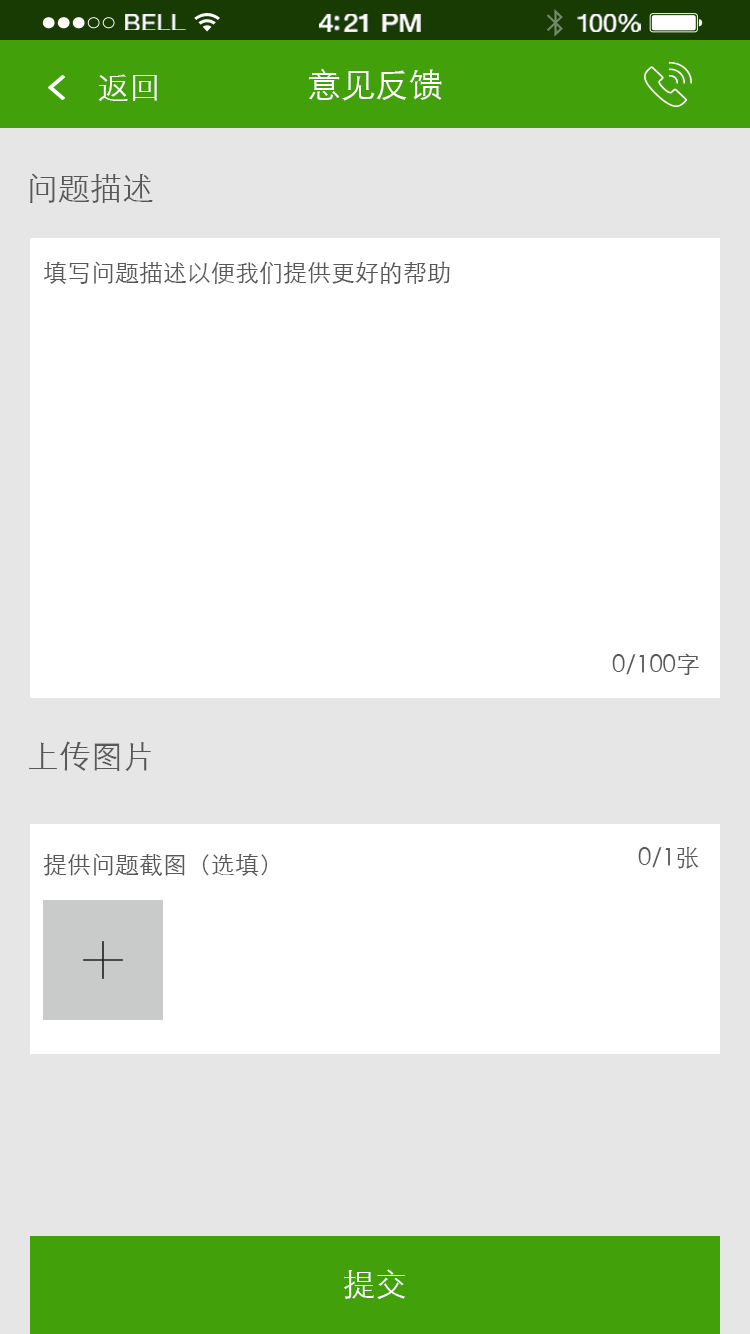
<style>
.page{position:relative;width:750px;height:1334px;background:#ffffff}
.page>*{position:absolute;margin:0}
.t1{font:23.3px "HelveticaNeue";letter-spacing:0.02em;color:#ffffff;scale:1.06 1}
.t2{font:25.3px "HelveticaNeue-Medium";letter-spacing:-0.02em;color:#ffffff;scale:1.06 1}
.t3{font:24.3px "HelveticaNeue";letter-spacing:-0.02em;color:#ffffff;scale:1.06 1}
.t4{font:32px "STXihei";color:#ffffff}
.t5{font:34px "STXihei";color:#ffffff}
.t6{font:32px "STXihei";color:#595757}
.t7{font:24px "STXihei";color:#595757}
</style>
<div class="page">
<p class="t1" style="left:125px;top:14px;width:61px;height:16px">BELL</p>
<p class="t2" style="left:319px;top:14px;width:102px;height:18px">4:21 PM</p>
<p class="t3" style="left:577px;top:14px;width:64px;height:18px">100%</p>
<p class="t4" style="left:98px;top:74px;width:59px;height:27px">返回</p>
<p class="t5" style="left:309px;top:68px;width:133px;height:33px">意见反馈</p>
<p class="t6" style="left:30px;top:173px;width:123px;height:30px">问题描述</p>
<p class="t7" style="left:43px;top:261px;width:407px;height:23px">填写问题描述以便我们提供更好的帮助</p>
<p class="t7" style="left:612px;top:653px;width:87px;height:22px">0/100字</p>
<p class="t6" style="left:29px;top:741px;width:122px;height:30px">上传图片</p>
<p class="t7" style="left:43px;top:853px;width:225px;height:23px">提供问题截图（选填）</p>
<p class="t7" style="left:638px;top:847px;width:61px;height:22px">0/1张</p>
<p class="t4" style="left:344px;top:1269px;width:61px;height:30px">提交</p>
</div>
